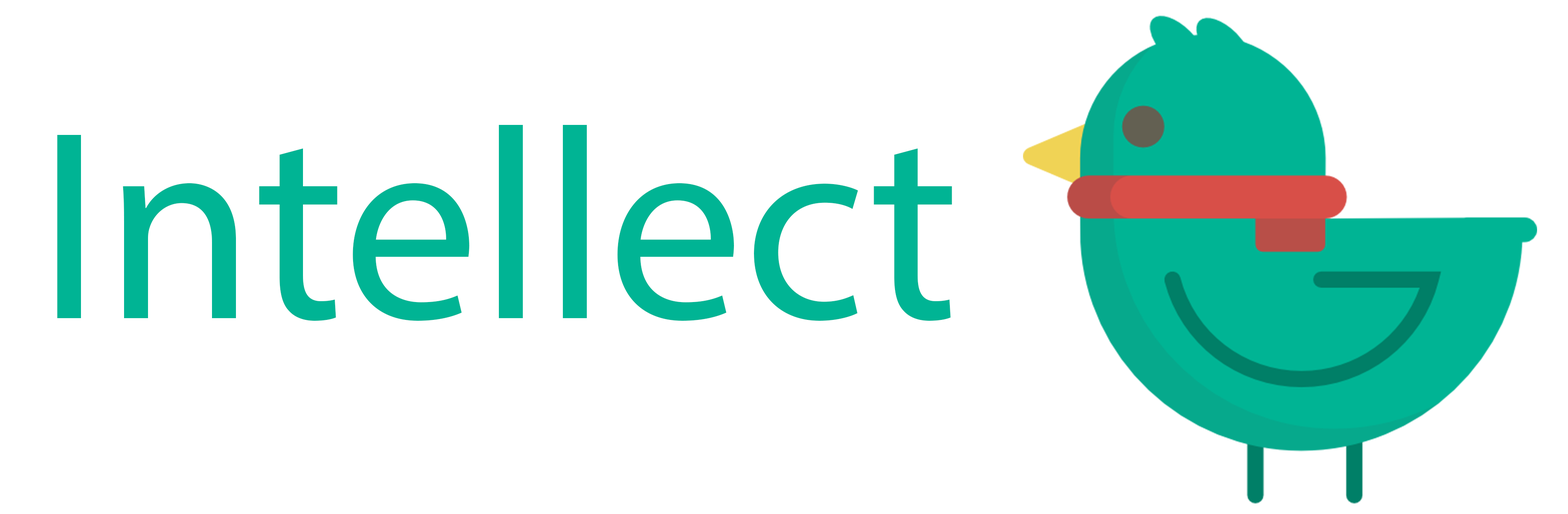
<style>
.page{position:relative;width:1568px;height:514px;background:#ffffff}
.page>*{position:absolute;margin:0}
.t1{font:272.1px "MyriadPro-Regular";color:#00b494}
</style>
<div class="page">
<p class="t1" style="left:57px;top:125px;width:895px;height:196px">Intellect</p>
</div>
